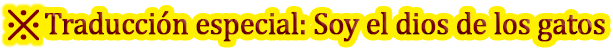
<style>
.page{position:relative;width:613px;height:50px;background:#ffffff}
.page>*{position:absolute;margin:0}
.t1{font:32px "Cambria";letter-spacing:-0.025em;font-weight:bold;scale:0.94 1}
</style>
<div class="page">
<p class="t1" style="left:45px;top:11px;width:560px;height:31px">Traducción especial: Soy el dios de los gatos</p>
</div>
